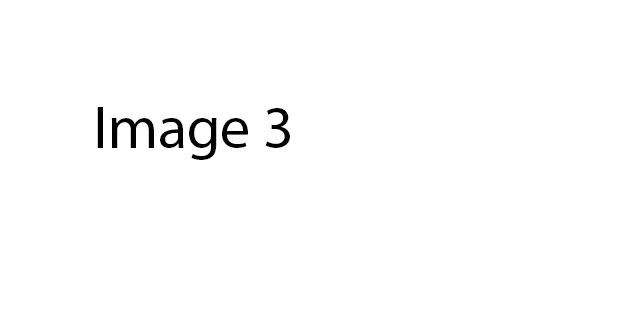
<style>
.page{position:relative;width:640px;height:320px;background:#ffffff}
.page>*{position:absolute;margin:0}
.t1{font:60px "MyriadPro-Regular";color:#000000}
</style>
<div class="page">
<p class="t1" style="left:97px;top:107px;width:193px;height:53px">Image 3</p>
</div>
